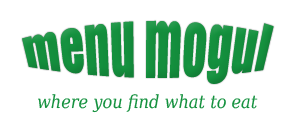
<style>
.page{position:relative;width:300px;height:125px;background:#ffffff}
.page>*{position:absolute;margin:0}
.t1{font:48px "Impact";color:#14913e}
.t2{font:18px "DejaVuSerifCondensed-Italic";color:#14913e}
</style>
<div class="page">
<p class="t1" style="left:22px;top:20px;width:252px;height:64px">menu mogul</p>
<p class="t2" style="left:38px;top:94px;width:220px;height:19px">where you find what to eat</p>
</div>
